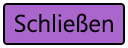
<style>
.page{position:relative;width:128px;height:48px;background:#aa66cc}
.page>*{position:absolute;margin:0}
.t1{font:24px "MicrosoftTaiLe";color:#030303}
</style>
<div class="page">
<p class="t1" style="left:15px;top:13px;width:98px;height:20px">Schließen</p>
</div>
